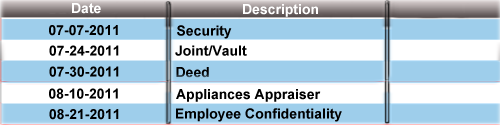
<style>
.page{position:relative;width:500px;height:130px;background:#9eceeb}
.page>*{position:absolute;margin:0}
.t1{font:14px "Arial-BoldMT";color:#ffffff}
.t2{font:14px "Arial-BoldMT";color:#000000}
</style>
<div class="page">
<p class="t1" style="left:72px;top:3px;width:29px;height:11px">Date</p>
<p class="t1" style="left:243px;top:4px;width:75px;height:13px">Description</p>
<p class="t2" style="left:49px;top:25px;width:69px;height:11px">07-07-2011</p>
<p class="t2" style="left:177px;top:25px;width:55px;height:14px">Security</p>
<p class="t2" style="left:49px;top:45px;width:70px;height:11px">07-24-2011</p>
<p class="t2" style="left:175px;top:45px;width:72px;height:11px">Joint/Vault</p>
<p class="t2" style="left:49px;top:66px;width:70px;height:11px">07-30-2011</p>
<p class="t2" style="left:176px;top:67px;width:33px;height:11px">Deed</p>
<p class="t2" style="left:49px;top:88px;width:69px;height:11px">08-10-2011</p>
<p class="t2" style="left:176px;top:89px;width:145px;height:13px">Appliances Appraiser</p>
<p class="t2" style="left:49px;top:109px;width:70px;height:11px">08-21-2011</p>
<p class="t2" style="left:176px;top:108px;width:166px;height:14px">Employee Confidentiality</p>
</div>
